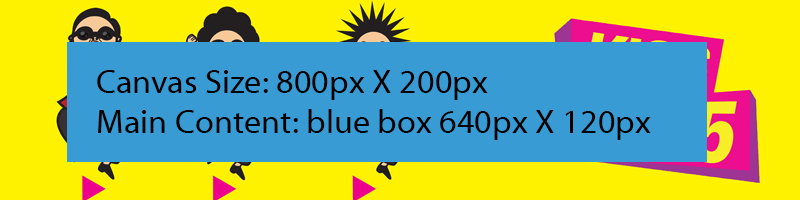
<style>
.page{position:relative;width:800px;height:200px;background:#389bd4}
.page>*{position:absolute;margin:0}
.t1{font:33.3px "MyriadWebPro";color:#000000}
</style>
<div class="page">
<p class="t1" style="left:97px;top:70px;width:554px;height:70px">Canvas Size: 800px X 200px<br>Main Content: blue box 640px X 120px</p>
</div>
